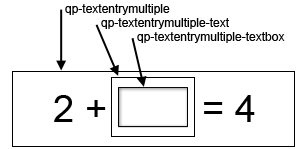
<style>
.page{position:relative;width:302px;height:149px;background:#ffffff}
.page>*{position:absolute;margin:0}
.t1{font:12px "ArialMT";color:#000000}
.t2{font:38px "ArialMT";color:#000000}
</style>
<div class="page">
<p class="t1" style="left:65px;top:4px;width:220px;height:39px">qp-textentrymultiple<br> qp-textentrymultiple-text<br>  qp-textentrymultiple-textbox</p>
<p class="t2" style="left:54px;top:95px;width:201px;height:27px">2 +         = 4</p>
</div>
